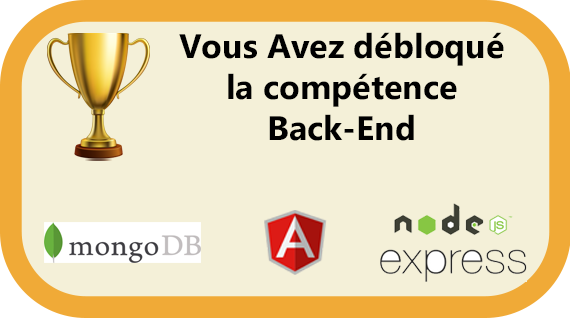
<style>
.page{position:relative;width:570px;height:318px;background:#f4f0d8}
.page>*{position:absolute;margin:0}
.t1{font:34px "Gadugi-Bold";color:#000000}
</style>
<div class="page">
<p class="t1" style="left:179px;top:32px;width:325px;height:109px;text-align:center">Vous Avez débloqué la compétence Back-End</p>
</div>
